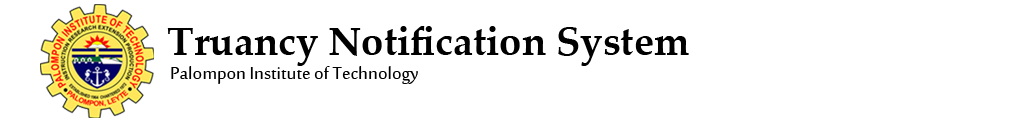
<style>
.page{position:relative;width:1017px;height:122px;background:#ffffff}
.page>*{position:absolute;margin:0}
.t1{font:40px "PalatinoLinotype-Bold";color:#000000}
.t2{font:24px "SakkalMajalla";color:#000000}
</style>
<div class="page">
<p class="t1" style="left:167px;top:26px;width:522px;height:40px">Truancy Notification System</p>
<p class="t2" style="left:171px;top:66px;width:247px;height:18px">Palompon Institute of Technology</p>
</div>
